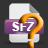
<style>
.page{position:relative;width:48px;height:48px;background:#333333}
.page>*{position:absolute;margin:0}
.t1{font:48px "Arial-BoldMT"}
.t2{font:12px "Arial-BoldMT";color:#ffffff}
</style>
<div class="page">
<p class="t1" style="left:18px;top:13px;width:26px;height:35px">?</p>
<p class="t2" style="left:12px;top:22px;width:23px;height:9px">SFZ</p>
</div>
